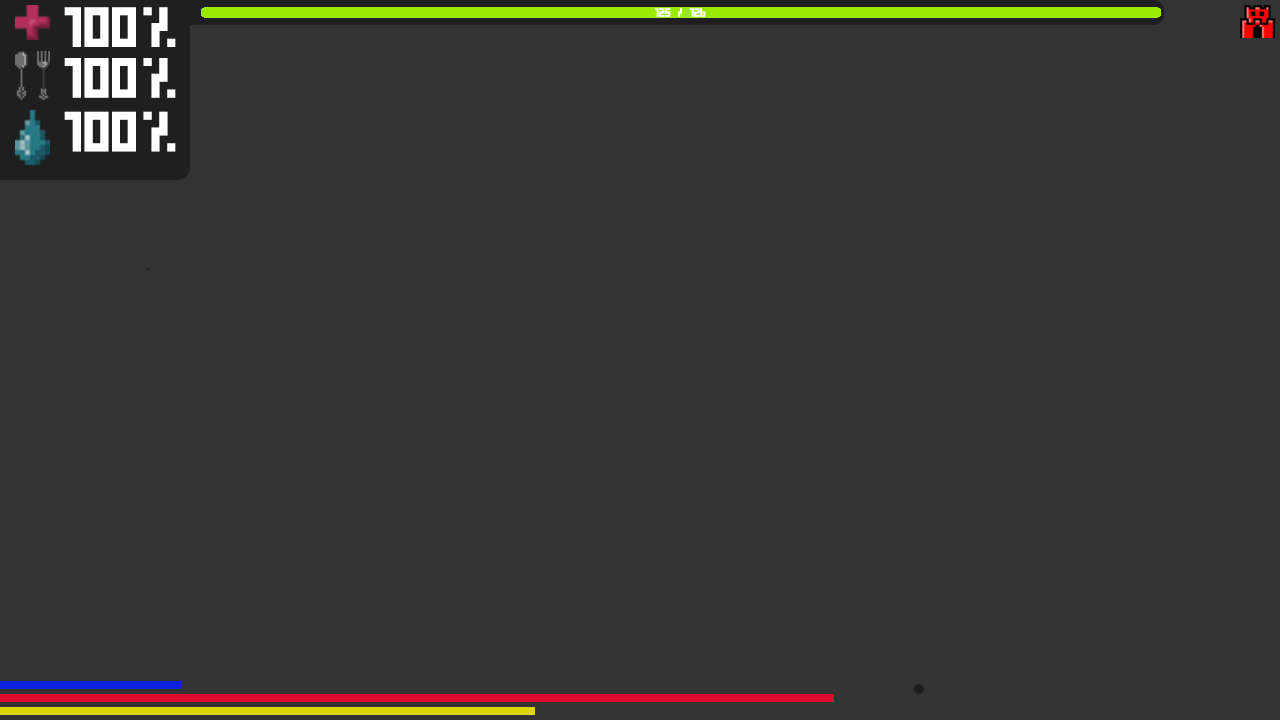
<style>
.page{position:relative;width:1280px;height:720px;background:#333333}
.page>*{position:absolute;margin:0}
.t1{font:56.3px "PixelCyr-Normal";color:#ffffff}
.t2{font:12px "PixelCyr-Normal";color:#ffffff}
</style>
<div class="page">
<p class="t1" style="left:64px;top:7px;width:112px;height:40px">100%</p>
<p class="t2" style="left:655px;top:8px;width:51px;height:9px">125 / 126</p>
<p class="t1" style="left:64px;top:58px;width:112px;height:40px">100%</p>
<p class="t1" style="left:64px;top:111px;width:112px;height:41px">100%</p>
</div>
